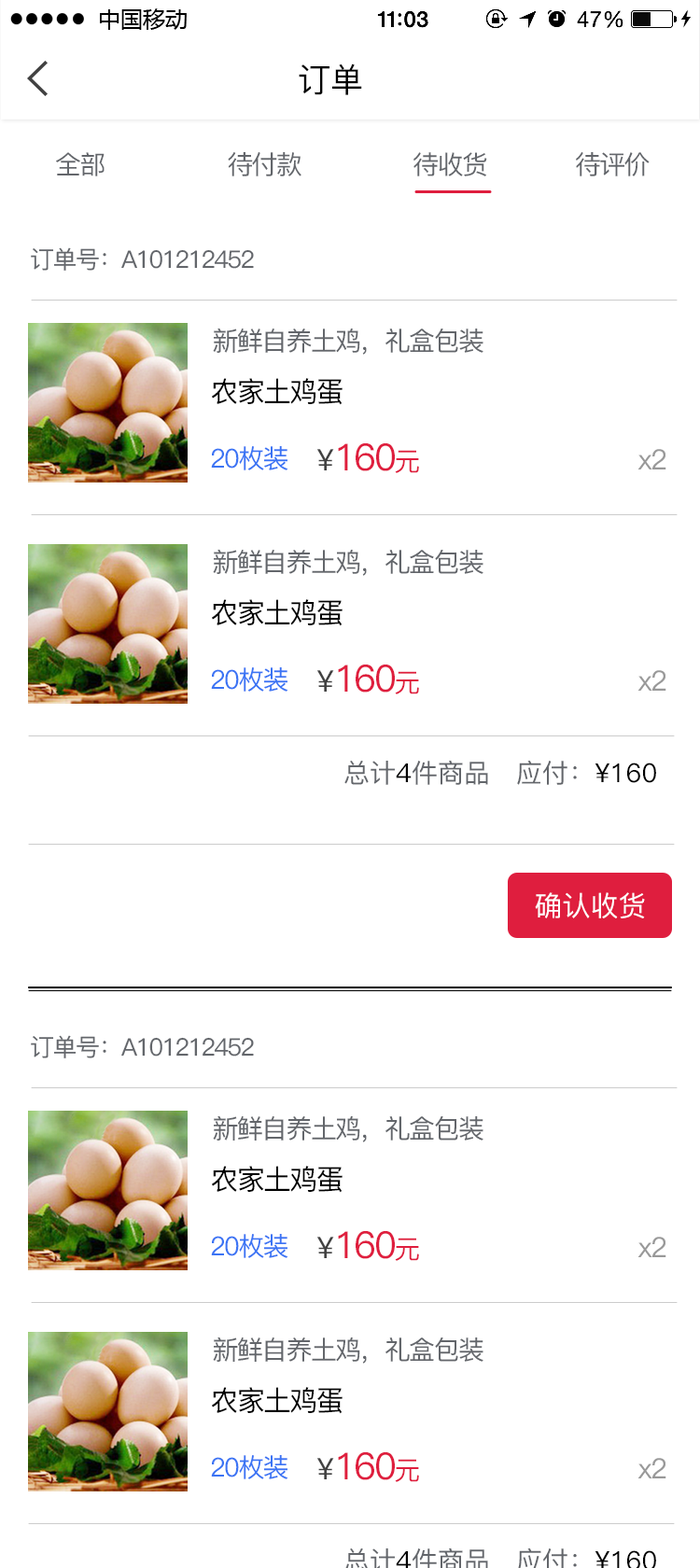
<style>
.page{position:relative;width:700px;height:1568px;background:#ffffff}
.page>*{position:absolute;margin:0}
.t1{font:33.3px "PingFang-SC-Medium";color:#000000}
.t2{font:25.8px "PingFang-SC-Medium";letter-spacing:-0.06em;color:#63666b}
.t3{font:26.1px "PingFang-SC-Medium";letter-spacing:-0.06em;color:#63666b}
.t4{font:24.3px "PingFang-SC-Medium";letter-spacing:-0.06em;color:#63666b}
.t5{font:28px "PingFang-SC-Medium";letter-spacing:-0.06em;color:#000000}
.t6{font:26.1px "PingFang-SC-Medium";letter-spacing:-0.06em;color:#3b74f4}
.t7{font:37.3px "PingFang-SC-Medium";letter-spacing:-0.06em;color:#df1e3e}
.t8{font:29.9px "PingFang-SC-Medium";color:#414141}
.t9{font:26.1px "PingFang-SC-Medium";letter-spacing:-0.06em;color:#df1e3e}
.t10{font:28px "PingFang-SC-Medium";letter-spacing:-0.06em;color:#999999}
.t11{font:26.1px "PingFang-SC-Medium";color:#63666b}
.t12{font:26.1px "PingFang-SC-Medium";color:#000000}
.t13{font:28px "PingFang-SC-Medium";color:#ffffff}
</style>
<div class="page">
<p class="t1" style="left:299px;top:63px;width:63px;height:32px">订单</p>
<p class="t2" style="left:56px;top:152px;width:49px;height:24px">全部</p>
<p class="t3" style="left:228px;top:152px;width:73px;height:24px">待付款</p>
<p class="t2" style="left:413px;top:152px;width:74px;height:24px">待收货</p>
<p class="t3" style="left:576px;top:152px;width:74px;height:24px">待评价</p>
<p class="t4" style="left:31px;top:247px;width:223px;height:24px">订单号：A101212452</p>
<p class="t3" style="left:213px;top:328px;width:270px;height:27px">新鲜自养土鸡，礼盒包装</p>
<p class="t5" style="left:212px;top:378px;width:131px;height:27px">农家土鸡蛋</p>
<p class="t6" style="left:211px;top:446px;width:77px;height:24px">20枚装</p>
<p class="t7" style="left:317px;top:443px;width:102px;height:30px"><span class="t8">¥</span>160<span class="t9">元</span></p>
<p class="t10" style="left:637px;top:449px;width:29px;height:20px">x2</p>
<p class="t3" style="left:213px;top:549px;width:270px;height:27px">新鲜自养土鸡，礼盒包装</p>
<p class="t5" style="left:212px;top:599px;width:131px;height:27px">农家土鸡蛋</p>
<p class="t7" style="left:317px;top:665px;width:102px;height:29px"><span class="t8">¥</span>160<span class="t9">元</span></p>
<p class="t6" style="left:211px;top:667px;width:77px;height:25px">20枚装</p>
<p class="t10" style="left:637px;top:670px;width:29px;height:21px">x2</p>
<p class="t11" style="left:344px;top:760px;width:312px;height:25px">总计<span class="t12">4</span>件商品   应付：<span class="t12">¥160</span></p>
<p class="t13" style="left:535px;top:892px;width:110px;height:26px">确认收货</p>
<p class="t4" style="left:31px;top:1035px;width:223px;height:23px">订单号：A101212452</p>
<p class="t3" style="left:213px;top:1115px;width:270px;height:27px">新鲜自养土鸡，礼盒包装</p>
<p class="t5" style="left:212px;top:1166px;width:131px;height:27px">农家土鸡蛋</p>
<p class="t6" style="left:211px;top:1234px;width:77px;height:24px">20枚装</p>
<p class="t7" style="left:317px;top:1231px;width:102px;height:30px"><span class="t8">¥</span>160<span class="t9">元</span></p>
<p class="t10" style="left:637px;top:1237px;width:29px;height:20px">x2</p>
<p class="t3" style="left:213px;top:1337px;width:270px;height:27px">新鲜自养土鸡，礼盒包装</p>
<p class="t5" style="left:212px;top:1387px;width:131px;height:27px">农家土鸡蛋</p>
<p class="t6" style="left:211px;top:1455px;width:77px;height:24px">20枚装</p>
<p class="t7" style="left:317px;top:1452px;width:102px;height:30px"><span class="t8">¥</span>160<span class="t9">元</span></p>
<p class="t10" style="left:637px;top:1458px;width:29px;height:20px">x2</p>
</div>
